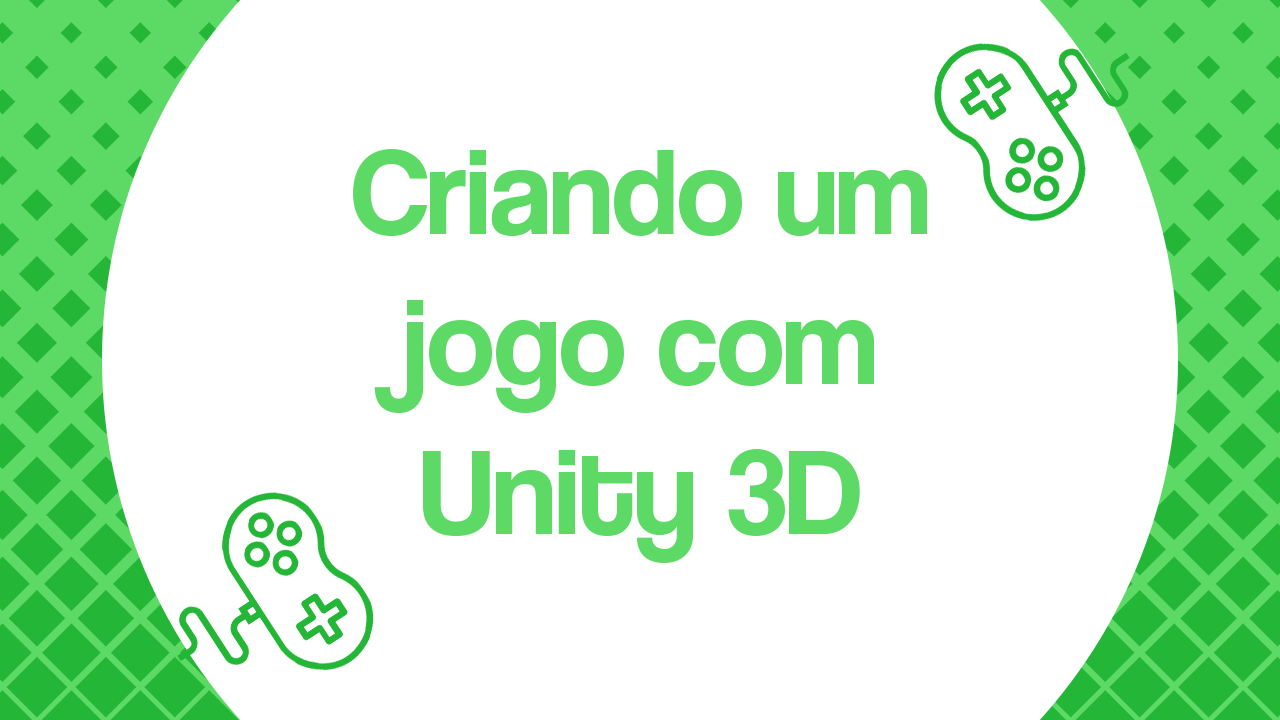
<style>
.page{position:relative;width:1280px;height:720px;background:#ffffff}
.page>*{position:absolute;margin:0}
.t1{font:125px "CoolveticaRg-Regular";color:#5dd966}
</style>
<div class="page">
<p class="t1" style="left:353px;top:149px;width:574px;height:414px;text-align:center">Criando um jogo com Unity 3D</p>
</div>
